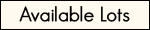
<style>
.page{position:relative;width:150px;height:30px;background:#fffaf0}
.page>*{position:absolute;margin:0}
.t1{font:20px "GeosansLight";color:#000000;font-weight:bold}
</style>
<div class="page">
<p class="t1" style="left:19px;top:6px;width:111px;height:16px">Available Lots</p>
</div>
